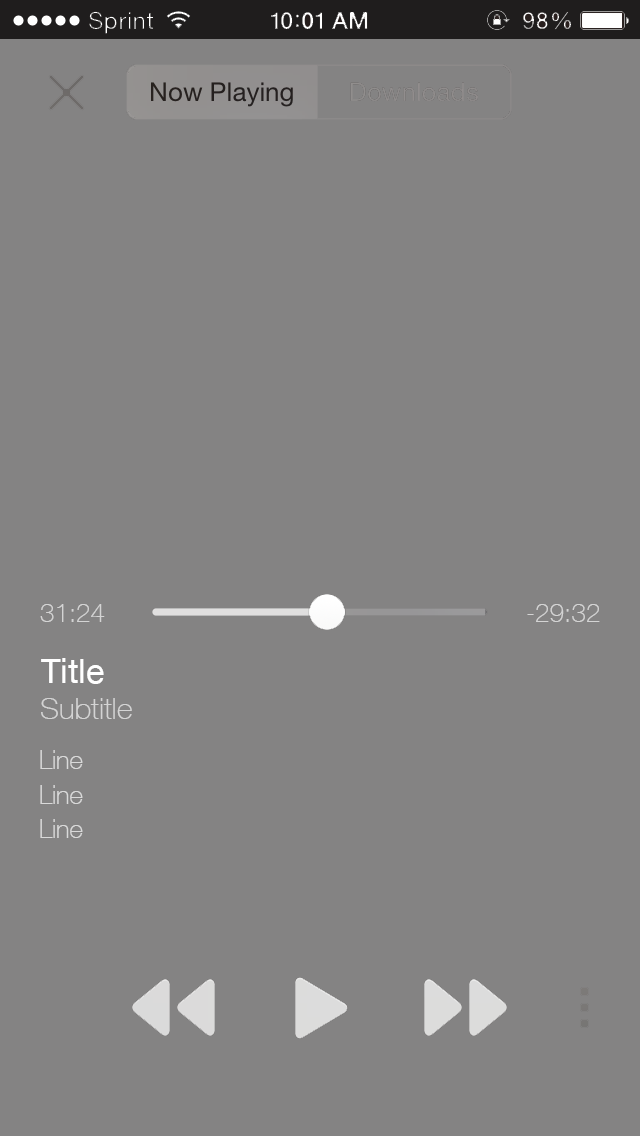
<style>
.page{position:relative;width:640px;height:1136px;background:#848383}
.page>*{position:absolute;margin:0}
.t1{font:26px "HelveticaNeue-Thin";color:#d4d4d4}
.t2{font:34px "HelveticaNeue";color:#ffffff}
.t3{font:30px "HelveticaNeue-Thin";color:#d4d4d4}
.t4{font:25.9px "HelveticaNeue-Thin";color:#d9d9d9}
</style>
<div class="page">
<p class="t1" style="left:40px;top:604px;width:65px;height:18px">31:24</p>
<p class="t1" style="left:527px;top:604px;width:73px;height:18px">-29:32</p>
<p class="t2" style="left:41px;top:658px;width:63px;height:26px">Title</p>
<p class="t3" style="left:41px;top:698px;width:91px;height:21px">Subtitle</p>
<p class="t4" style="left:40px;top:750px;width:43px;height:19px">Line</p>
<p class="t4" style="left:40px;top:785px;width:43px;height:19px">Line</p>
<p class="t4" style="left:40px;top:819px;width:43px;height:19px">Line</p>
</div>
